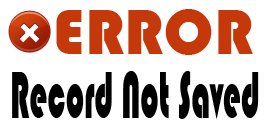
<style>
.page{position:relative;width:270px;height:132px;background:#ffffff}
.page>*{position:absolute;margin:0}
.t1{font:66.4px "Bauhaus93";letter-spacing:0.01em;color:#c4380a}
.t2{font:69.3px "Bauhaus93";letter-spacing:0.01em;color:#000000;scale:0.46 1}
</style>
<div class="page">
<p class="t1" style="left:56px;top:9px;width:197px;height:46px">ERROR</p>
<p class="t2" style="left:12px;top:71px;width:247px;height:49px">Record Not Saved</p>
</div>
